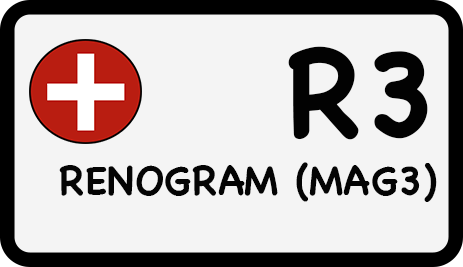
<style>
.page{position:relative;width:463px;height:267px;background:#f4f4f4}
.page>*{position:absolute;margin:0}
.t1{font:120px "Chalkboard-Bold";color:#020202}
.t2{font:40px "Chalkboard-Bold";color:#040404}
</style>
<div class="page">
<p class="t1" style="left:288px;top:46px;width:140px;height:94px">R3</p>
<p class="t2" style="left:59px;top:162px;width:378px;height:40px">RENOGRAM (MAG3)</p>
</div>
